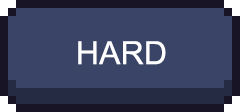
<style>
.page{position:relative;width:240px;height:112px;background:#3a4466}
.page>*{position:absolute;margin:0}
.t1{font:32px "ArialMT";letter-spacing:0.005em;color:#fefefe}
</style>
<div class="page">
<p class="t1" style="left:78px;top:41px;width:88px;height:24px">HARD</p>
</div>
